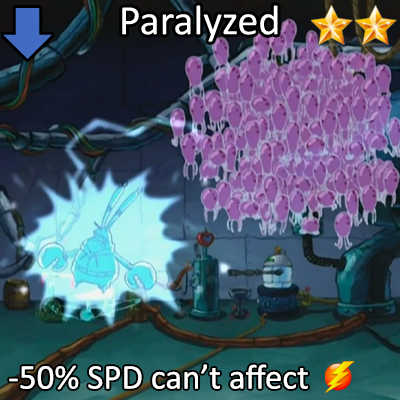
<style>
.page{position:relative;width:400px;height:400px}
.page>*{position:absolute;margin:0}
.t1{font:72px "Calibri";color:#ffffff}
.t2{font:60px "Calibri";color:#ffffff}
</style>
<div class="page">
<p class="t1" style="left:122px;top:5px;width:156px;height:37px">Paralyzed</p>
<p class="t2" style="left:9px;top:364px;width:299px;height:26px">-50% SPD can’t affect</p>
</div>
